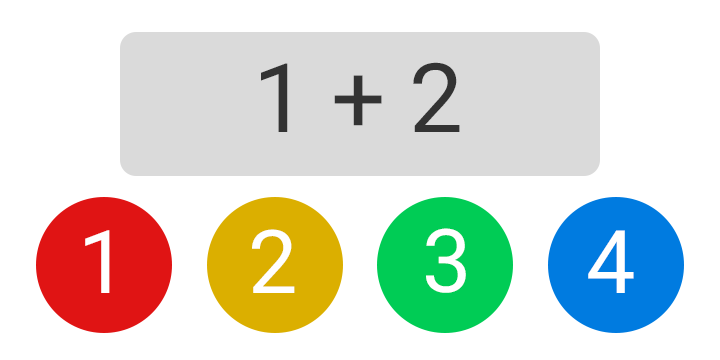
<style>
.page{position:relative;width:720px;height:360px;background:#ffffff}
.page>*{position:absolute;margin:0}
.t1{font:96px "Roboto-Regular";color:#333333}
.t2{font:88px "Roboto-Regular";color:#ffffff}
</style>
<div class="page">
<p class="t1" style="left:261px;top:62px;width:199px;height:70px">1 + 2</p>
<p class="t2" style="left:85px;top:230px;width:25px;height:63px">1</p>
<p class="t2" style="left:252px;top:229px;width:43px;height:64px">2</p>
<p class="t2" style="left:426px;top:228px;width:40px;height:65px">3</p>
<p class="t2" style="left:588px;top:230px;width:46px;height:63px">4</p>
</div>
